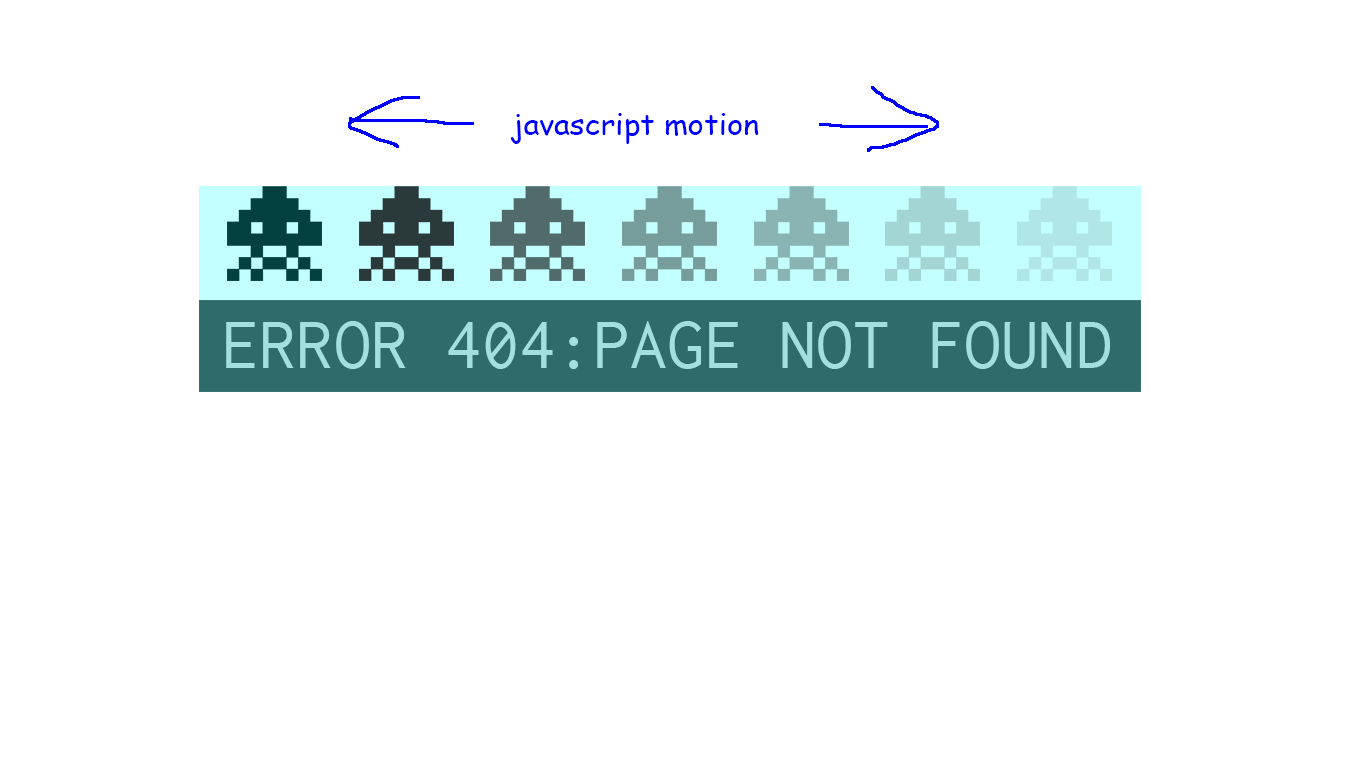
<style>
.page{position:relative;width:1366px;height:768px;background:#ffffff}
.page>*{position:absolute;margin:0}
.t1{font:30.3px "ComicSansMS";color:#0000ff}
.t2{font:74.2px "Inconsolata-Regular";color:#a4dfdf}
</style>
<div class="page">
<p class="t1" style="left:510px;top:113px;width:249px;height:31px">javascript motion</p>
<p class="t2" style="left:226px;top:321px;width:884px;height:48px">ERROR 404:PAGE NOT FOUND</p>
</div>
